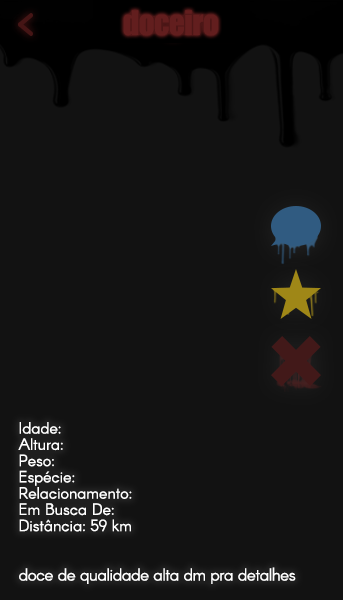
<style>
.page{position:relative;width:343px;height:600px;background:#121212}
.page>*{position:absolute;margin:0}
.t1{font:31px "Impact";letter-spacing:-0.015em;color:#621e1e}
.t2{font:16px "Arcon-Regular";color:#ffffff}
.t3{font:17px "Arcon-Regular";letter-spacing:-0.027em;color:#ffffff}
</style>
<div class="page">
<p class="t1" style="left:123px;top:10px;width:95px;height:26px">doceiro</p>
<p class="t2" style="left:18px;top:422px;width:114px;height:110px">Idade:<br>Altura:<br>Peso:<br>Espécie:<br>Relacionamento:<br>Em Busca De:<br>Distância: 59 km</p>
<p class="t3" style="left:19px;top:567px;width:277px;height:17px">doce de qualidade alta dm pra detalhes</p>
</div>
